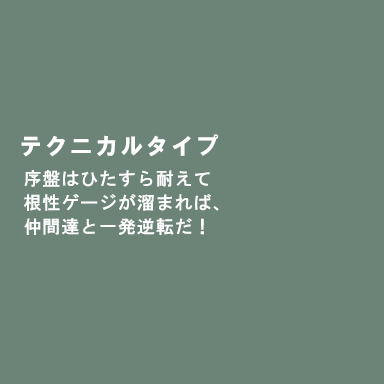
<style>
.page{position:relative;width:384px;height:384px;background:#6c8478}
.page>*{position:absolute;margin:0}
.t1{font:24px "HGSSoeiKakugothicUB";letter-spacing:0.05em;color:#ffffff}
.t2{font:18px/24px "HGSGothicE";letter-spacing:0.05em;color:#ffffff}
</style>
<div class="page">
<p class="t1" style="left:21px;top:134px;width:198px;height:23px">テクニカルタイプ</p>
<p class="t2" style="left:24px;top:170px;width:195px;height:65px">序盤はひたすら耐えて<br>根性ゲージが溜まれば、<br>仲間達と一発逆転だ！</p>
</div>
